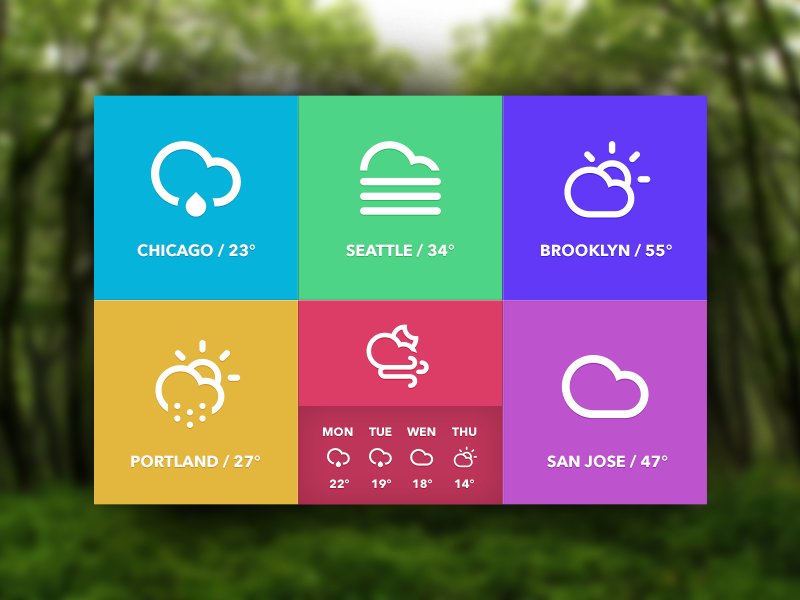
<style>
.page{position:relative;width:800px;height:600px}
.page>*{position:absolute;margin:0}
.t1{font:16px "AvenirNext-Bold";color:#ffffff;text-transform:uppercase}
.t2{font:12px "AvenirNext-Bold";color:#ffffff;text-transform:uppercase}
</style>
<div class="page">
<p class="t1" style="left:137px;top:243px;width:118px;height:14px">Chicago / 23°</p>
<p class="t1" style="left:346px;top:243px;width:108px;height:14px">seattle / 34°</p>
<p class="t1" style="left:541px;top:243px;width:131px;height:14px">brooklyn / 55°</p>
<p class="t2" style="left:323px;top:427px;width:30px;height:9px">mon</p>
<p class="t2" style="left:369px;top:427px;width:23px;height:9px">tue</p>
<p class="t2" style="left:407px;top:427px;width:29px;height:9px">wen</p>
<p class="t2" style="left:452px;top:427px;width:25px;height:9px">thu</p>
<p class="t1" style="left:131px;top:454px;width:129px;height:14px">portland / 27°</p>
<p class="t1" style="left:547px;top:454px;width:121px;height:14px">san jose / 47°</p>
<p class="t2" style="left:329px;top:479px;width:20px;height:9px">22°</p>
<p class="t2" style="left:371px;top:479px;width:20px;height:9px">19°</p>
<p class="t2" style="left:412px;top:479px;width:20px;height:9px">18°</p>
<p class="t2" style="left:454px;top:479px;width:20px;height:9px">14°</p>
</div>
